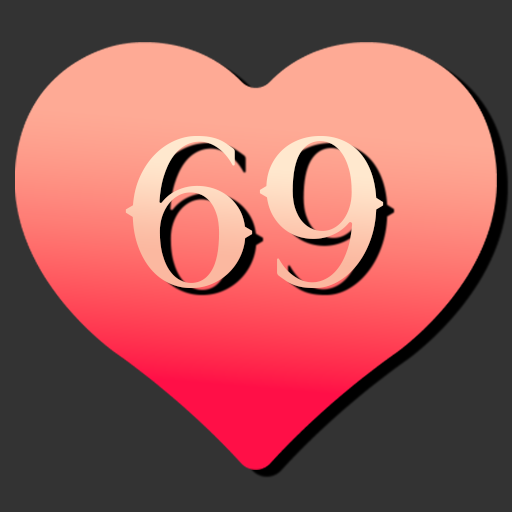
<style>
.page{position:relative;width:512px;height:512px;background:#333333}
.page>*{position:absolute;margin:0}
.t1{font:196.9px "TheSimbiod-Regular"}
</style>
<div class="page">
<p class="t1" style="left:125px;top:136px;width:259px;height:152px">69</p>
</div>
